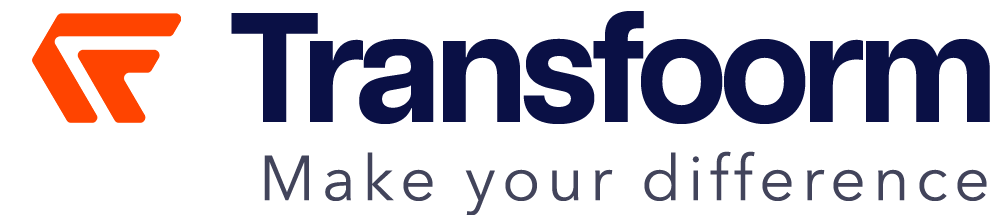
<style>
.page{position:relative;width:990px;height:215px;background:#ffffff}
.page>*{position:absolute;margin:0}
.t1{font:63px "AvenirNext-Regular";letter-spacing:0.107em;color:#42445b}
</style>
<div class="page">
<p class="t1" style="left:264px;top:151px;width:723px;height:65px">Make your difference</p>
</div>
